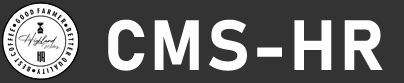
<style>
.page{position:relative;width:404px;height:83px;background:#333333}
.page>*{position:absolute;margin:0}
.t1{font:70px "Bahnschrift-Bold";letter-spacing:0.04em;color:#ffffff;font-weight:bold}
</style>
<div class="page">
<p class="t1" style="left:108px;top:19px;width:275px;height:52px">CMS-HR</p>
</div>
